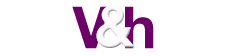
<style>
.page{position:relative;width:241px;height:56px;background:#ffffff}
.page>*{position:absolute;margin:0}
.t1{font:58.3px "HelveticaNeue-Bold";color:#6c0268}
.t2{font:58.3px "HelveticaNeue-Bold";color:#fdfafd}
</style>
<div class="page">
<p class="t1" style="left:72px;top:6px;width:38px;height:43px">V</p>
<p class="t2" style="left:96px;top:5px;width:39px;height:43px">&amp;</p>
<p class="t1" style="left:125px;top:6px;width:29px;height:43px">h</p>
</div>
